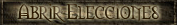
<style>
.page{position:relative;width:177px;height:25px}
.page>*{position:absolute;margin:0}
.t1{font:20px "Morpheus"}
</style>
<div class="page">
<p class="t1" style="left:17px;top:4px;width:143px;height:18px">Abrir Elecciones</p>
</div>
